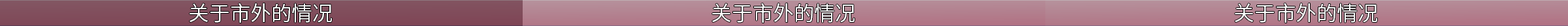
<style>
.page{position:relative;width:1568px;height:26px}
.page>*{position:absolute;margin:0}
.t1{font:20.6px "SourceHanSansSC-Normal";color:#ffffff}
</style>
<div class="page">
<p class="t1" style="left:189px;top:3px;width:143px;height:20px">关于市外的情况</p>
<p class="t1" style="left:712px;top:3px;width:143px;height:20px">关于市外的情况</p>
<p class="t1" style="left:1235px;top:3px;width:142px;height:20px">关于市外的情况</p>
</div>
